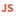
<style>
.page{position:relative;width:16px;height:16px;background:#ffffff}
.page>*{position:absolute;margin:0}
.t1{font:12px "SourceSansPro-Bold";color:#ee4e44}
</style>
<div class="page">
<p class="t1" style="left:1px;top:4px;width:13px;height:8px">JS</p>
</div>
